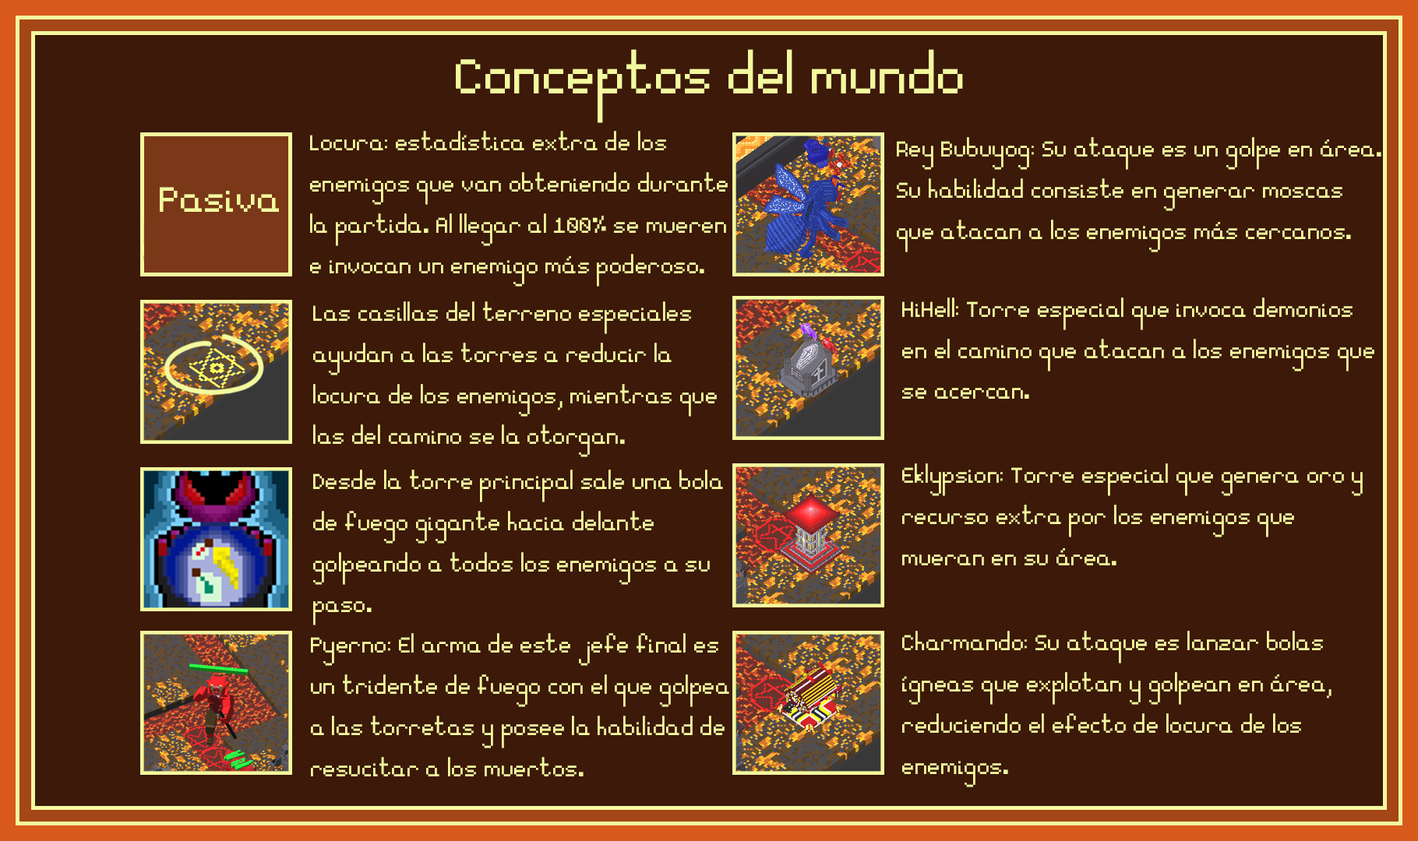
<style>
.page{position:relative;width:1418px;height:841px;background:#3c1908}
.page>*{position:absolute;margin:0}
.t1{font:77.9px "Essential";color:#f3f99e}
.t2{font:34.3px "Essential";color:#f3f99e}
.t3{font:56.1px "Essential";color:#f3f99e}
</style>
<div class="page">
<p class="t1" style="left:456px;top:49px;width:507px;height:74px">Conceptos del mundo</p>
<p class="t2" style="left:310px;top:131px;width:417px;height:156px">Locura: estadística extra de los<br>enemigos que van obteniendo durante<br>la partida. Al llegar al 100% se mueren<br>e invocan un enemigo más poderoso.</p>
<p class="t2" style="left:896px;top:137px;width:485px;height:115px">Rey Bubuyog: Su ataque es un golpe en área.<br>Su habilidad consiste en generar moscas <br>que atacan a los enemigos más cercanos.</p>
<p class="t3" style="left:160px;top:187px;width:119px;height:25px">Pasiva</p>
<p class="t2" style="left:313px;top:301px;width:404px;height:156px">Las casillas del terreno especiales<br>ayudan a las torres a reducir la<br>locura de los enemigos, mientras que<br>las del camino se la otorgan.</p>
<p class="t2" style="left:902px;top:298px;width:472px;height:101px">HiHell: Torre especial que invoca demonios <br>en el camino que atacan a los enemigos que <br>se acercan.</p>
<p class="t2" style="left:313px;top:470px;width:410px;height:155px">Desde la torre principal sale una bola <br>de fuego gigante hacia delante <br>golpeando a todos los enemigos a su<br>paso.</p>
<p class="t2" style="left:902px;top:463px;width:460px;height:102px">Eklypsion: Torre especial que genera oro y <br>recurso extra por los enemigos que <br>mueran en su área.</p>
<p class="t2" style="left:311px;top:633px;width:418px;height:144px">Pyerno: El arma de este jefe final es<br>un tridente de fuego con el que golpea <br>a las torretas y posee la habilidad de <br>resucitar a los muertos.</p>
<p class="t2" style="left:902px;top:631px;width:429px;height:156px">Charmando: Su ataque es lanzar bolas<br>ígneas que explotan y golpean en área, <br>reduciendo el efecto de locura de los <br>enemigos.</p>
</div>
